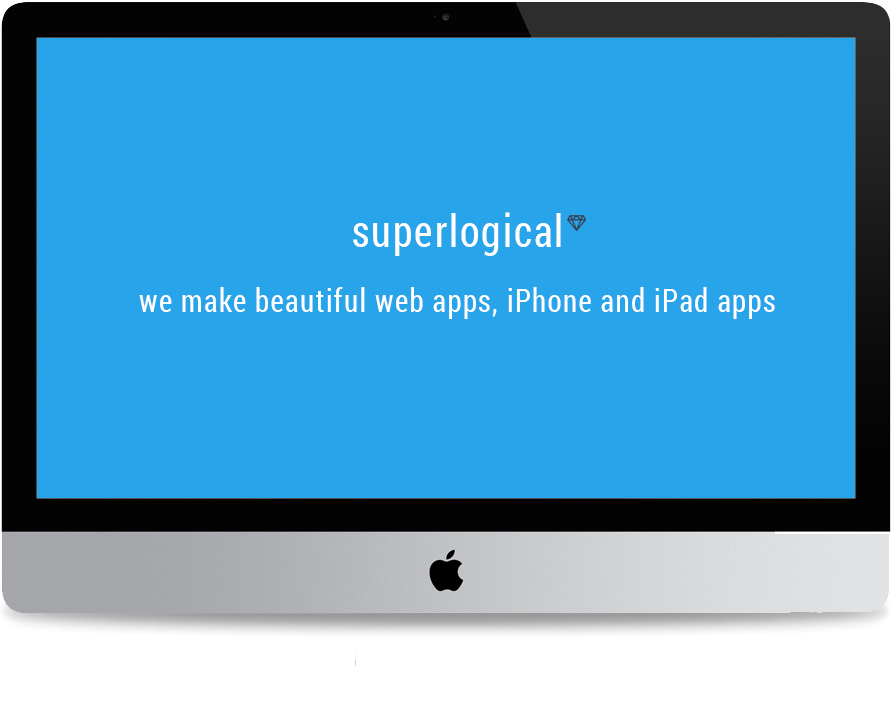
<style>
.page{position:relative;width:892px;height:723px;background:#28a4ea}
.page>*{position:absolute;margin:0}
.t1{font:45px "RobotoCondensed-Regular";letter-spacing:0.05em;color:#ffffff;scale:0.89 1}
.t2{font:32.4px "RobotoCondensed-Regular";letter-spacing:0.05em;color:#ffffff;scale:0.89 1}
</style>
<div class="page">
<p class="t1" style="left:353px;top:212px;width:208px;height:44px">superlogical</p>
<p class="t2" style="left:139px;top:287px;width:636px;height:32px">we make beautiful web apps, iPhone and iPad apps</p>
</div>
